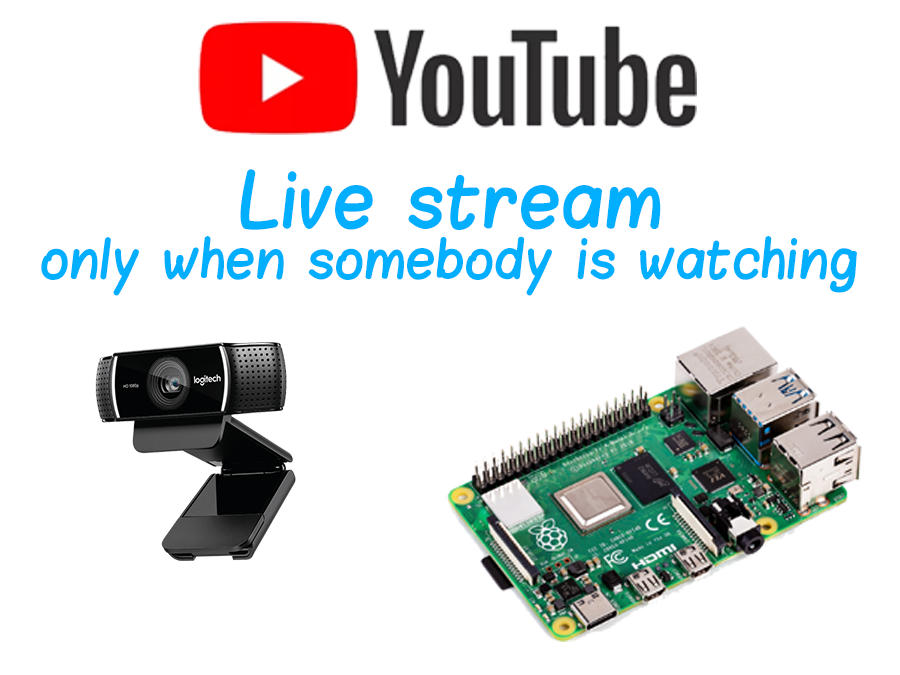
<style>
.page{position:relative;width:900px;height:675px;background:#ffffff}
.page>*{position:absolute;margin:0}
.t1{font:60px "Blokletters-Viltstift";letter-spacing:0.02em;color:#02afff}
.t2{font:42.9px "Blokletters-Viltstift";letter-spacing:0.02em;color:#02afff}
</style>
<div class="page">
<p class="t1" style="left:240px;top:169px;width:421px;height:61px">Live stream</p>
<p class="t2" style="left:41px;top:236px;width:816px;height:60px">only when somebody is watching</p>
</div>
